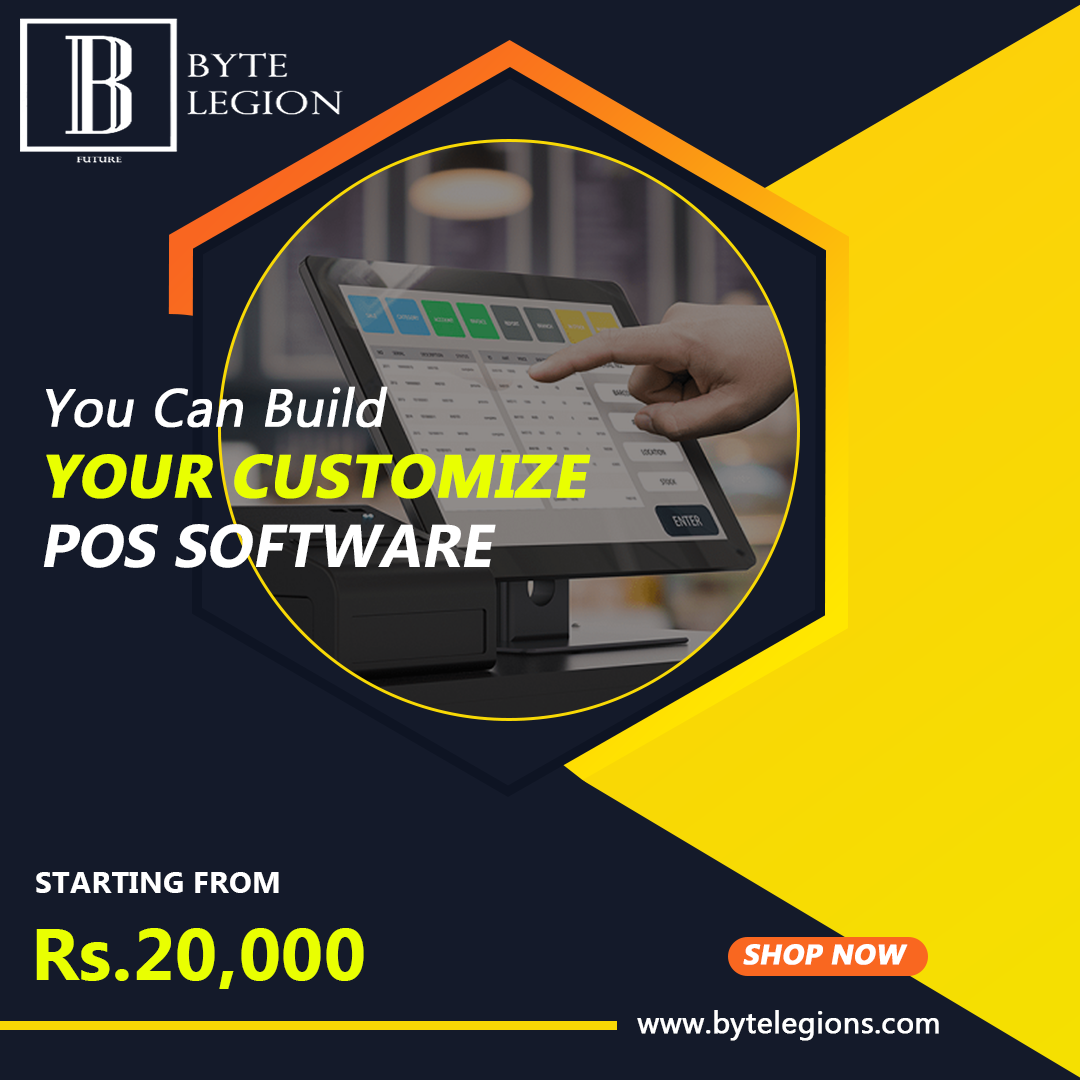
<style>
.page{position:relative;width:1080px;height:1080px;background:#141a2a}
.page>*{position:absolute;margin:0}
.t1{font:60.2px/70.6px "MyanmarText-Bold";color:#e9ff01;text-transform:uppercase;font-weight:bold;font-style:italic}
.t2{font:53px/70.6px "MyanmarText";color:#ffffff;font-weight:bold;font-style:italic}
.t3{font:60.2px/70.6px "MyanmarText-Bold";color:#ffffff;text-transform:uppercase;font-style:italic}
.t4{font:30px "MyanmarText-Bold";letter-spacing:0.01em;color:#ffffff;text-transform:uppercase}
.t5{font:73px "MyanmarText-Bold";letter-spacing:0.01em;color:#e9ff01}
.t6{font:73px "MyanmarText-Bold";letter-spacing:0.01em;color:#e9ff01;text-transform:uppercase}
.t7{font:28px "MyanmarText-Bold";color:#ffffff;text-transform:uppercase;font-weight:bold;font-style:italic}
.t8{font:30px "MyanmarText";color:#ffffff;font-weight:bold}
</style>
<div class="page">
<p class="t1" style="left:43px;top:386px;width:548px;height:182px"><span class="t2">You Can Build<br></span>your customize <br><span class="t3">POS Software</span></p>
<p class="t4" style="left:36px;top:872px;width:243px;height:21px">Starting From</p>
<p class="t5" style="left:36px;top:928px;width:328px;height:61px"><span class="t6">R</span>s.20,000</p>
<p class="t7" style="left:743px;top:944px;width:165px;height:21px">shop now</p>
<p class="t8" style="left:637px;top:1010px;width:302px;height:31px">www.bytelegions.com</p>
</div>
